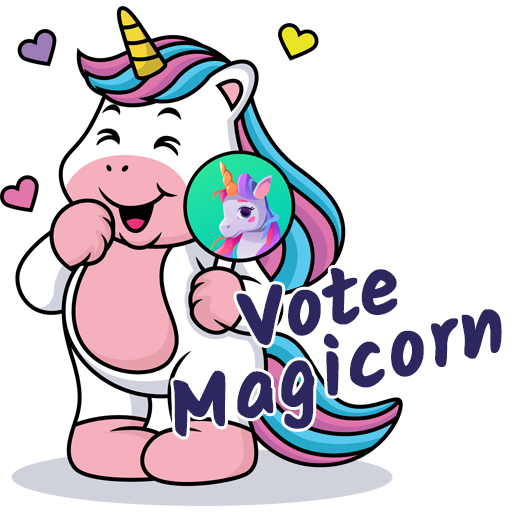
<style>
.page{position:relative;width:512px;height:512px;background:#ffffff}
.page>*{position:absolute;margin:0}
.t1{font:83.3px/66.7px "Kalam-Bold";letter-spacing:0.025em;color:#2c275f;font-weight:bold}
</style>
<div class="page">
<p class="t1" style="left:173px;top:268px;width:329px;height:169px;text-align:center;rotate:-15deg">Vote<br>Magicorn</p>
</div>
